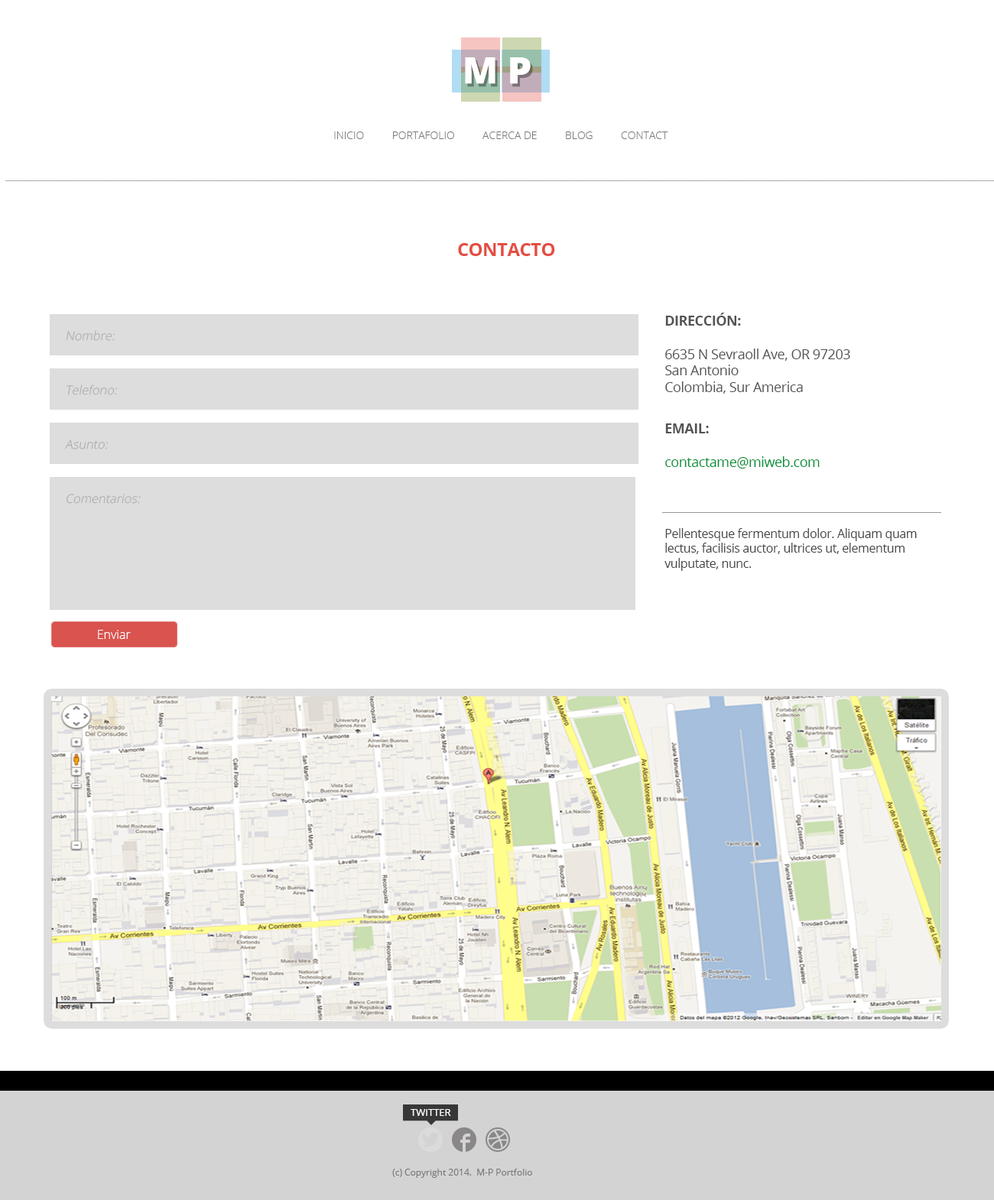
<style>
.page{position:relative;width:994px;height:1200px;background:#ffffff}
.page>*{position:absolute;margin:0}
.t1{font:36.7px "OpenSans-Extrabold";letter-spacing:0.25em;color:#ffffff}
.t2{font:36.7px "OpenSans-Extrabold";letter-spacing:0.25em;color:#ffffff;scale:1.06 1}
.t3{font:10.7px "OpenSans-Light";color:#7a7a7a;text-transform:uppercase}
.t4{font:18.3px "OpenSans-Bold";letter-spacing:-0.025em;color:#e54d42;text-transform:uppercase}
.t5{font:13.8px "OpenSans";letter-spacing:-0.025em;color:#535353}
.t6{font:13.8px "OpenSans-Bold";letter-spacing:-0.025em;color:#535353;text-transform:uppercase}
.t7{font:12.2px "OpenSans-Light";color:#aeaeae;font-style:italic}
.t8{font:13.8px "OpenSans";letter-spacing:-0.025em;color:#009036}
.t9{font:12.2px "OpenSans";letter-spacing:-0.025em;color:#434343}
.t10{font:12.2px "OpenSans-Light";color:#ffffff}
.t11{font:9.9px "OpenSans";color:#ffffff;text-transform:uppercase}
.t12{font:9.2px "OpenSans";color:#7a7a7a}
</style>
<div class="page">
<p class="t1" style="left:465px;top:57px;width:65px;height:27px">M<span class="t2">P</span></p>
<p class="t3" style="left:334px;top:131px;width:334px;height:8px">INICIO          PortAfolio          ACERCA DE          BLOG          Contact</p>
<p class="t4" style="left:458px;top:243px;width:97px;height:13px">contacto</p>
<p class="t5" style="left:665px;top:313px;width:185px;height:81px"><span class="t6">Dirección:<br><br></span>6635 N Sevraoll Ave, OR 97203<br>San Antonio<br>Colombia, Sur America</p>
<p class="t7" style="left:66px;top:330px;width:49px;height:11px">Nombre:</p>
<p class="t7" style="left:66px;top:384px;width:52px;height:11px">Telefono:</p>
<p class="t8" style="left:665px;top:423px;width:154px;height:46px"><span class="t6">Email:<br><br></span>contactame@miweb.com</p>
<p class="t7" style="left:65px;top:440px;width:44px;height:9px">Asunto:</p>
<p class="t7" style="left:66px;top:494px;width:75px;height:10px">Comentarios:</p>
<p class="t9" style="left:664px;top:528px;width:252px;height:43px">Pellentesque fermentum dolor. Aliquam quam lectus, facilisis auctor, ultrices ut, elementum vulputate, nunc.</p>
<p class="t10" style="left:98px;top:630px;width:33px;height:9px">Enviar</p>
<p class="t11" style="left:410px;top:1109px;width:41px;height:7px">twitter</p>
<p class="t12" style="left:392px;top:1169px;width:140px;height:9px">(c) Copyright 2014.  M-P Portfolio</p>
</div>
